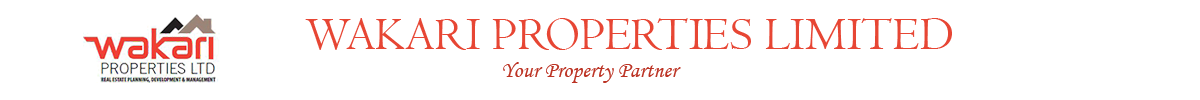
<style>
.page{position:relative;width:1200px;height:100px;background:#ffffff}
.page>*{position:absolute;margin:0}
.t1{font:47.3px "Centaur";color:#e74634}
.t2{font:22.4px "MonotypeCorsiva";color:#bc3324}
</style>
<div class="page">
<p class="t1" style="left:305px;top:18px;width:647px;height:32px">WAKARI PROPERTIES LIMITED</p>
<p class="t2" style="left:503px;top:62px;width:178px;height:21px">Your Property Partner</p>
</div>
